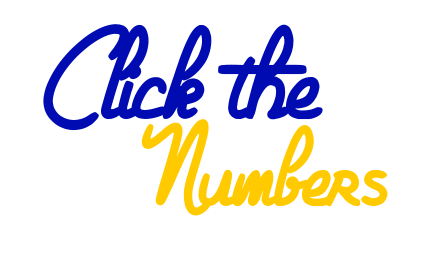
<style>
.page{position:relative;width:430px;height:260px;background:#ffffff}
.page>*{position:absolute;margin:0}
.t1{font:140px "GelatinaElemente";color:#000cb2}
.t2{font:120px "GelatinaElemente";color:#ffca00}
</style>
<div class="page">
<p class="t1" style="left:43px;top:24px;width:280px;height:107px">Click the</p>
<p class="t2" style="left:141px;top:119px;width:247px;height:97px">Numbers</p>
</div>
